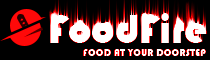
<style>
.page{position:relative;width:210px;height:60px;background:#000000}
.page>*{position:absolute;margin:0}
.t1{font:10.4px "Bauhaus93";color:#ffffff}
</style>
<div class="page">
<p class="t1" style="left:83px;top:49px;width:123px;height:7px">FOOD AT YOUR DOORSTEP</p>
</div>
